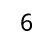
<style>
.page{position:relative;width:53px;height:41px;background:#ffffff}
.page>*{position:absolute;margin:0}
.t1{font:23.7px "DroidSans";color:#000000}
</style>
<div class="page">
<p class="t1" style="left:21px;top:13px;width:11px;height:18px">6</p>
</div>
